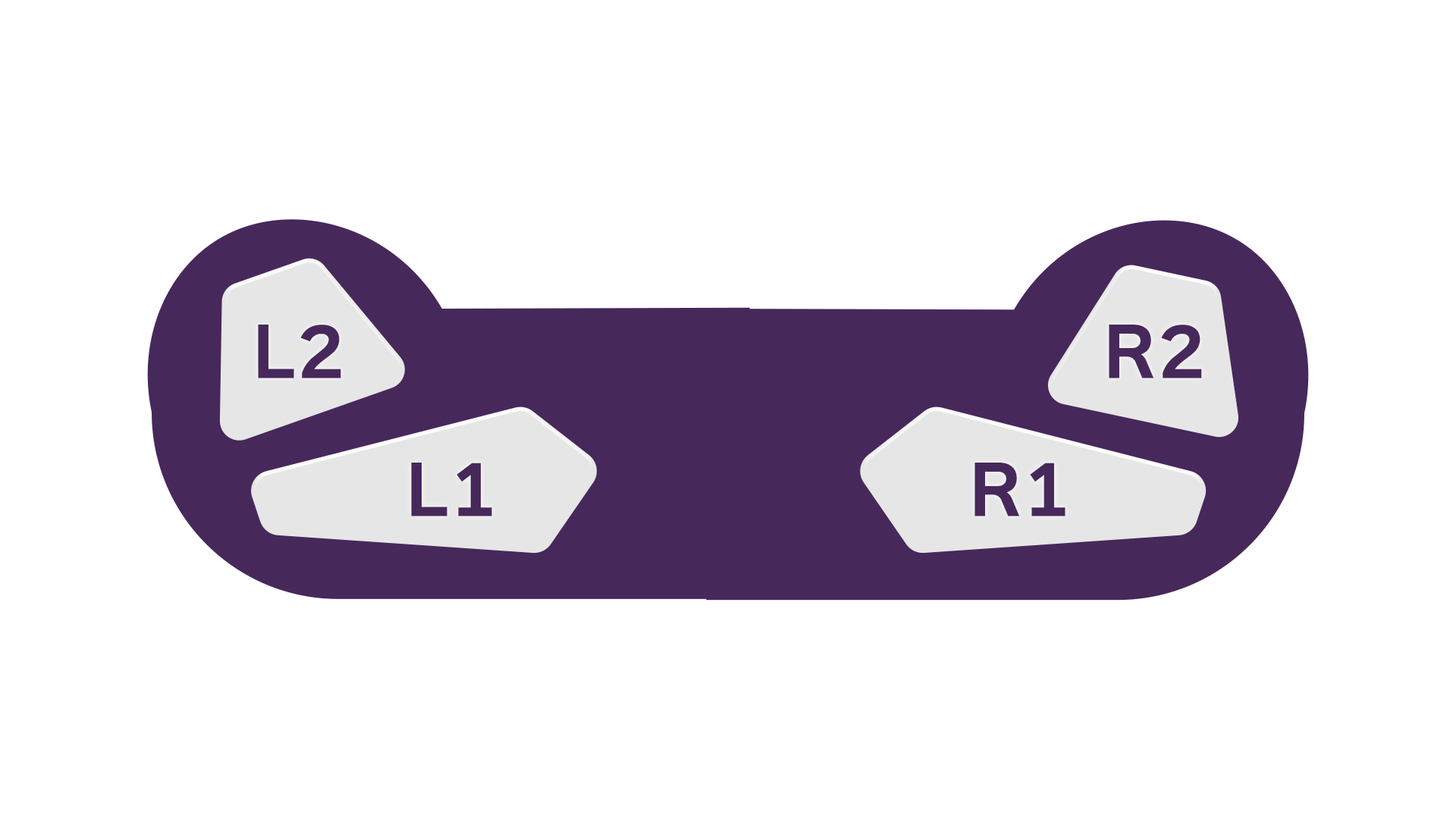
<style>
.page{position:relative;width:1456px;height:819px;background:#ffffff}
.page>*{position:absolute;margin:0}
.t1{font:67.4px "NitalagoRuika-06";color:#47285b}
</style>
<div class="page">
<p class="t1" style="left:258px;top:325px;width:83px;height:53px">L2</p>
<p class="t1" style="left:1109px;top:325px;width:93px;height:53px">R2</p>
<p class="t1" style="left:411px;top:463px;width:81px;height:53px">L1</p>
<p class="t1" style="left:974px;top:463px;width:91px;height:53px">R1</p>
</div>
